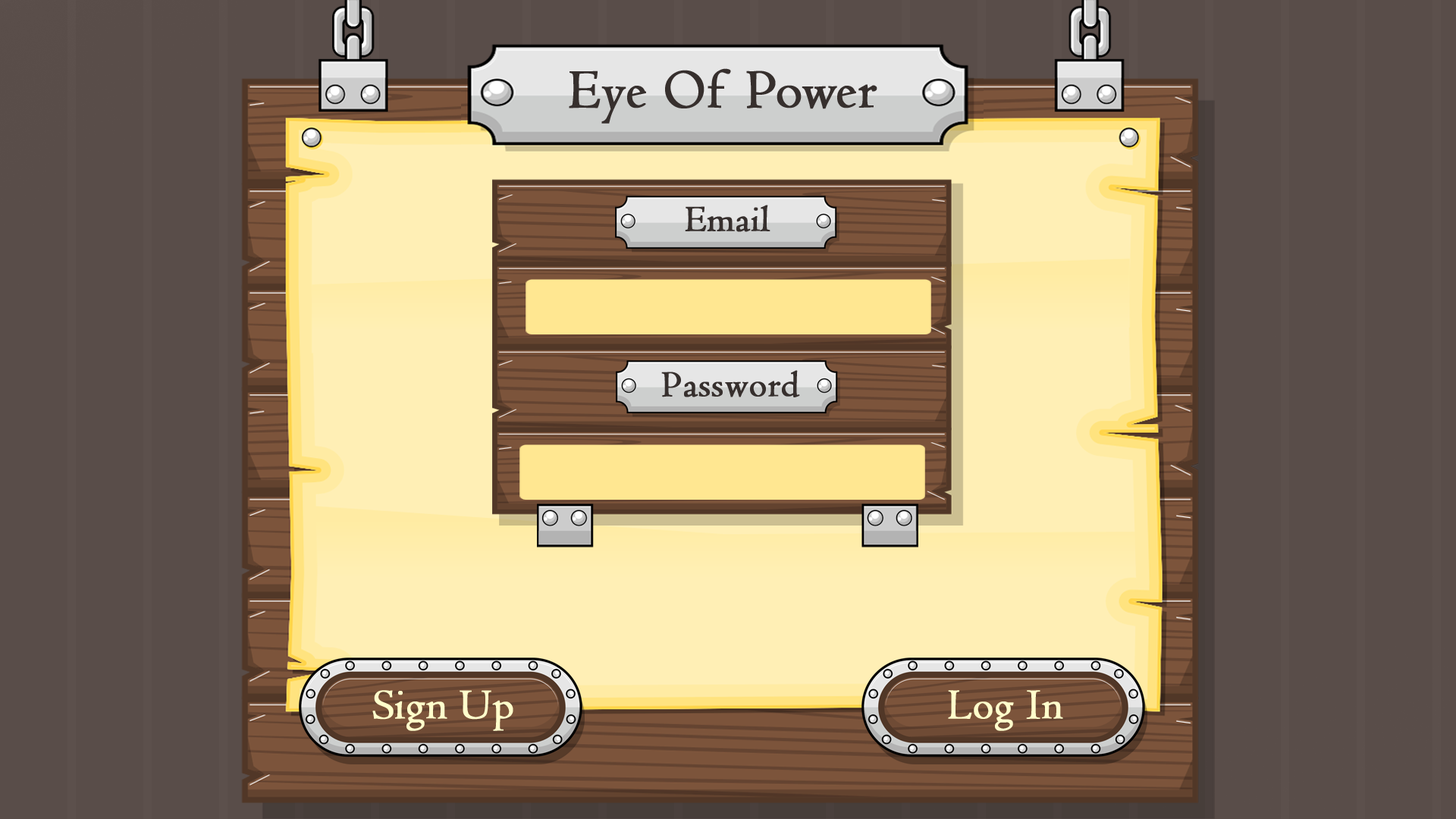
<style>
.page{position:relative;width:1456px;height:819px;background:#594d49}
.page>*{position:absolute;margin:0}
.t1{font:56.7px "Centaur";color:#362f2d;font-weight:bold}
.t2{font:37.8px "Centaur";color:#362f2d;font-weight:bold}
.t3{font:44.1px "Centaur";color:#ffffcc;font-weight:bold}
</style>
<div class="page">
<p class="t1" style="left:569px;top:68px;width:308px;height:56px">Eye Of Power</p>
<p class="t2" style="left:685px;top:205px;width:85px;height:27px">Email</p>
<p class="t2" style="left:661px;top:370px;width:139px;height:27px">Password</p>
<p class="t3" style="left:372px;top:690px;width:141px;height:41px">Sign Up</p>
<p class="t3" style="left:948px;top:690px;width:115px;height:41px">Log In</p>
</div>
